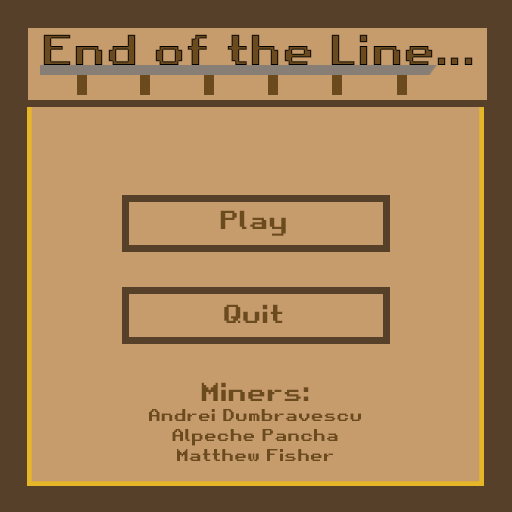
<style>
.page{position:relative;width:512px;height:512px;background:#c69c6d}
.page>*{position:absolute;margin:0}
.t1{font:41.7px "RetroGaming"}
.t2{font:25px "RetroGaming";color:#6b4b1d}
.t3{font:16.7px "RetroGaming";color:#6b4b1d}
</style>
<div class="page">
<p class="t1" style="left:43px;top:34px;width:430px;height:31px">End of the Line...</p>
<p class="t2" style="left:220px;top:210px;width:66px;height:26px">Play</p>
<p class="t2" style="left:224px;top:304px;width:59px;height:19px">Quit</p>
<p class="t3" style="left:149px;top:382px;width:212px;height:79px;text-align:center"><span class="t2">Miners:<br></span>Andrei Dumbravescu<br>Alpeche Pancha<br>Matthew Fisher</p>
</div>
